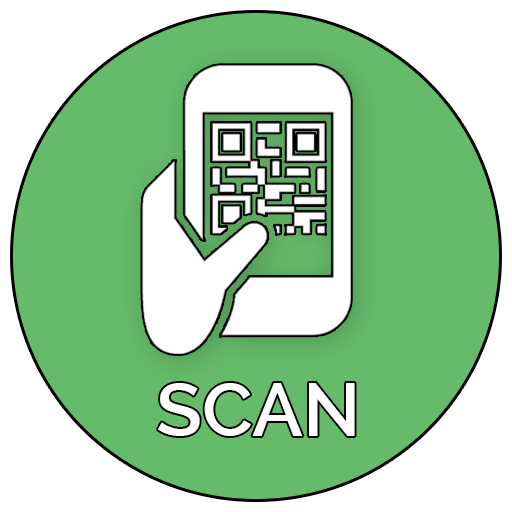
<style>
.page{position:relative;width:512px;height:512px;background:#ffffff}
.page>*{position:absolute;margin:0}
.t1{font:75px "Raleway-SemiBold";color:#ffffff}
</style>
<div class="page">
<p class="t1" style="left:158px;top:383px;width:197px;height:53px">SCAN</p>
</div>
